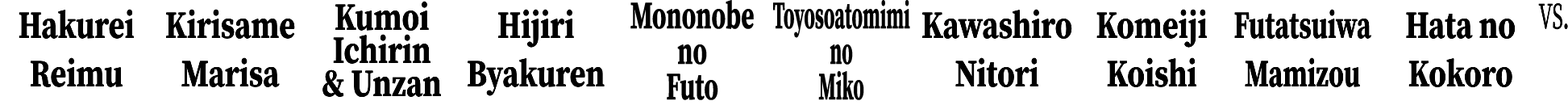
<style>
.page{position:relative;width:1568px;height:105px;background:#ffffff}
.page>*{position:absolute;margin:0}
.t1{font:38.7px/33.1px "SourceSerifPro-Bold";color:#000000;scale:0.8 1}
.t2{font:38.7px/35.5px "SourceSerifPro-Bold";color:#000000;scale:0.65 1}
.t3{font:38.7px/35.5px "SourceSerifPro-Bold";color:#000000;scale:0.5 1}
.t4{font:37.1px "SourceSerifPro-Regular";color:#000000;scale:0.57 1}
.t5{font:38.7px "SourceSerifPro-Regular";color:#000000;scale:0.57 1}
.t6{font:38.7px/48.4px "SourceSerifPro-Bold";color:#000000;scale:0.8 1}
.t7{font:38.7px/48.4px "SourceSerifPro-Bold";color:#000000;scale:0.7 1}
</style>
<div class="page">
<p class="t1" style="left:322px;top:1px;width:120px;height:96px;text-align:center">Kumoi<br>Ichirin<br>&amp; Unzan</p>
<p class="t2" style="left:630px;top:0px;width:124px;height:100px;text-align:center">Mononobe<br>no<br>Futo</p>
<p class="t3" style="left:773px;top:0px;width:137px;height:100px;text-align:center">Toyosoatomimi<br>no<br>Miko</p>
<p class="t4" style="left:1538px;top:3px;width:30px;height:27px">VS<span class="t5">.</span></p>
<p class="t6" style="left:19px;top:9px;width:115px;height:78px;text-align:center">Hakurei<br>Reimu</p>
<p class="t6" style="left:166px;top:9px;width:129px;height:78px;text-align:center">Kirisame<br>Marisa</p>
<p class="t6" style="left:468px;top:9px;width:137px;height:87px;text-align:center">Hijiri<br>Byakuren</p>
<p class="t6" style="left:922px;top:9px;width:150px;height:78px;text-align:center">Kawashiro<br>Nitori</p>
<p class="t6" style="left:1096px;top:9px;width:111px;height:78px;text-align:center">Komeiji<br>Koishi</p>
<p class="t7" style="left:1234px;top:9px;width:137px;height:78px;text-align:center">Futatsuiwa<br>Mamizou</p>
<p class="t6" style="left:1406px;top:12px;width:109px;height:75px;text-align:center">Hata no<br>Kokoro</p>
</div>
